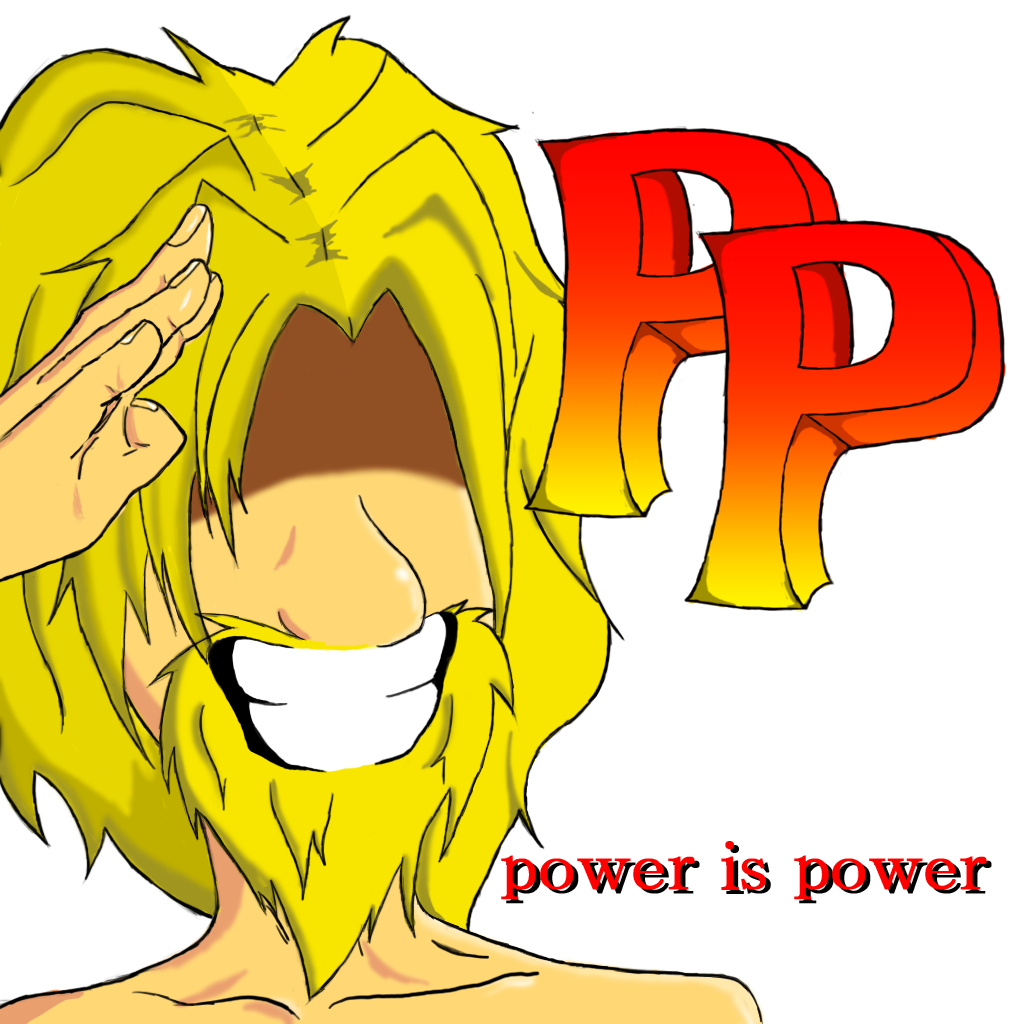
<style>
.page{position:relative;width:1024px;height:1024px;background:#ffffff}
.page>*{position:absolute;margin:0}
.t1{font:66.7px "HGSeikaishotaiPRO";color:#ff0000;font-weight:bold}
.t2{font:66.7px "HGSeikaishotaiPRO";color:#000000;font-weight:bold}
</style>
<div class="page">
<p class="t1" style="left:501px;top:841px;width:486px;height:59px">power is power</p>
<p class="t2" style="left:506px;top:845px;width:486px;height:59px">power is power</p>
</div>
